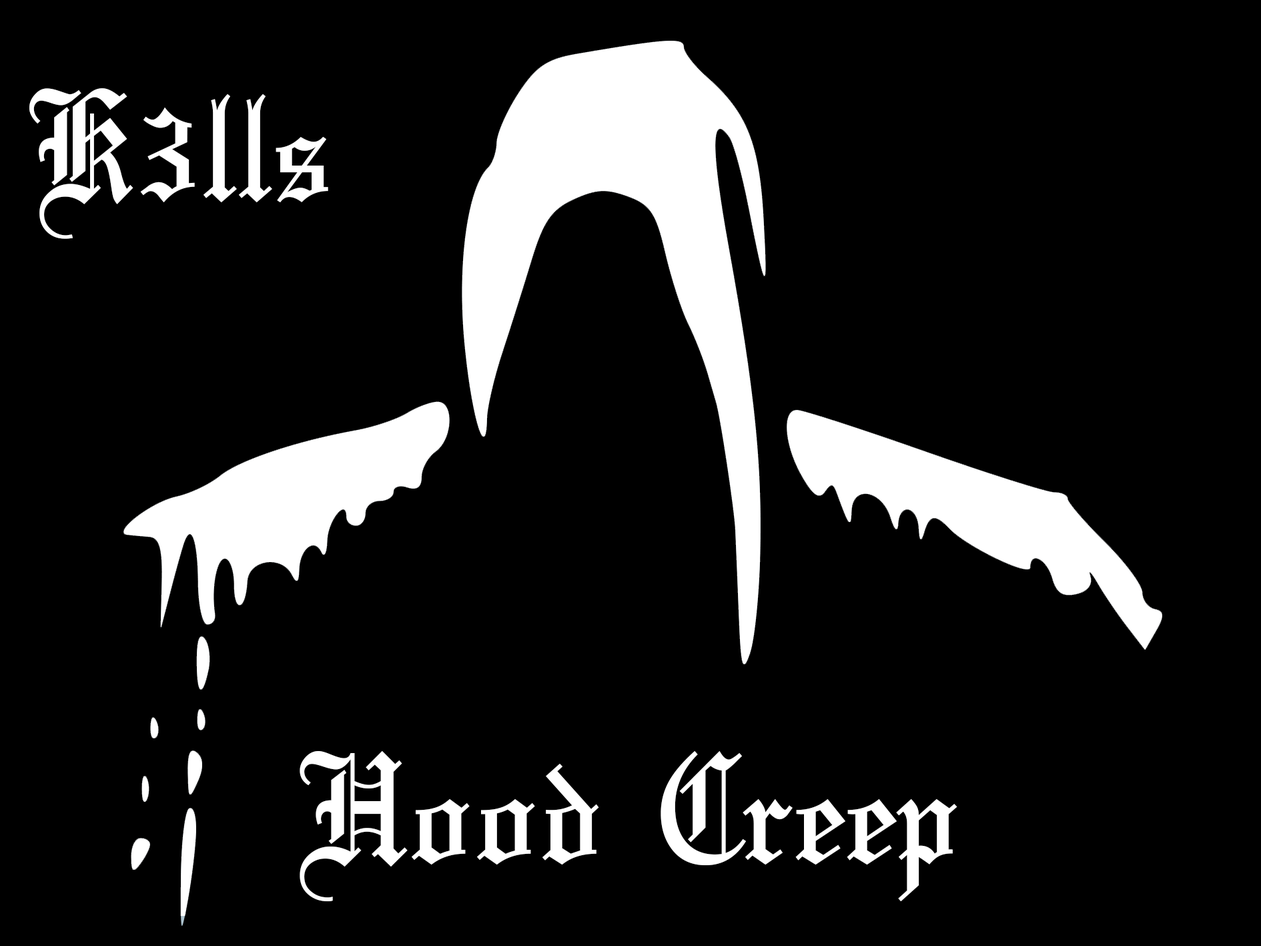
<style>
.page{position:relative;width:1261px;height:946px;background:#000000}
.page>*{position:absolute;margin:0}
.t1{font:166.8px "OldeEnglish-Regular";color:#ffffff}
</style>
<div class="page">
<p class="t1" style="left:29px;top:88px;width:299px;height:151px">K3lls</p>
<p class="t1" style="left:300px;top:751px;width:658px;height:150px">Hood Creep</p>
</div>
